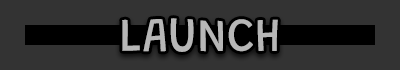
<style>
.page{position:relative;width:400px;height:70px;background:#333333}
.page>*{position:absolute;margin:0}
.t1{font:48px "Grandstander-Regular";color:#b7b7b7}
</style>
<div class="page">
<p class="t1" style="left:122px;top:18px;width:156px;height:34px">LAUNCH</p>
</div>
